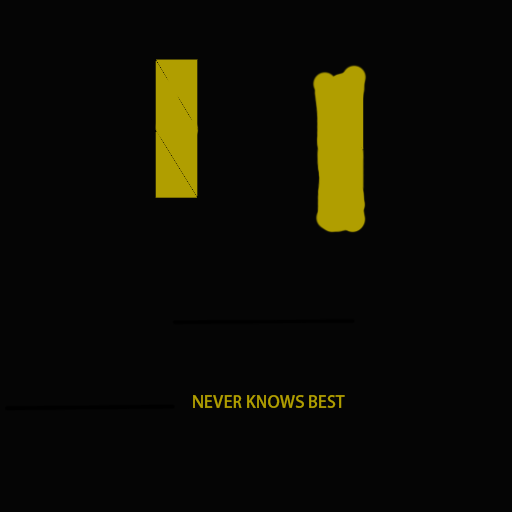
<style>
.page{position:relative;width:512px;height:512px;background:#050505}
.page>*{position:absolute;margin:0}
.t1{font:16.7px "AdobeHeitiStd-Regular";color:#b09e00}
</style>
<div class="page">
<p class="t1" style="left:193px;top:395px;width:152px;height:13px">NEVER KNOWS BEST</p>
</div>
